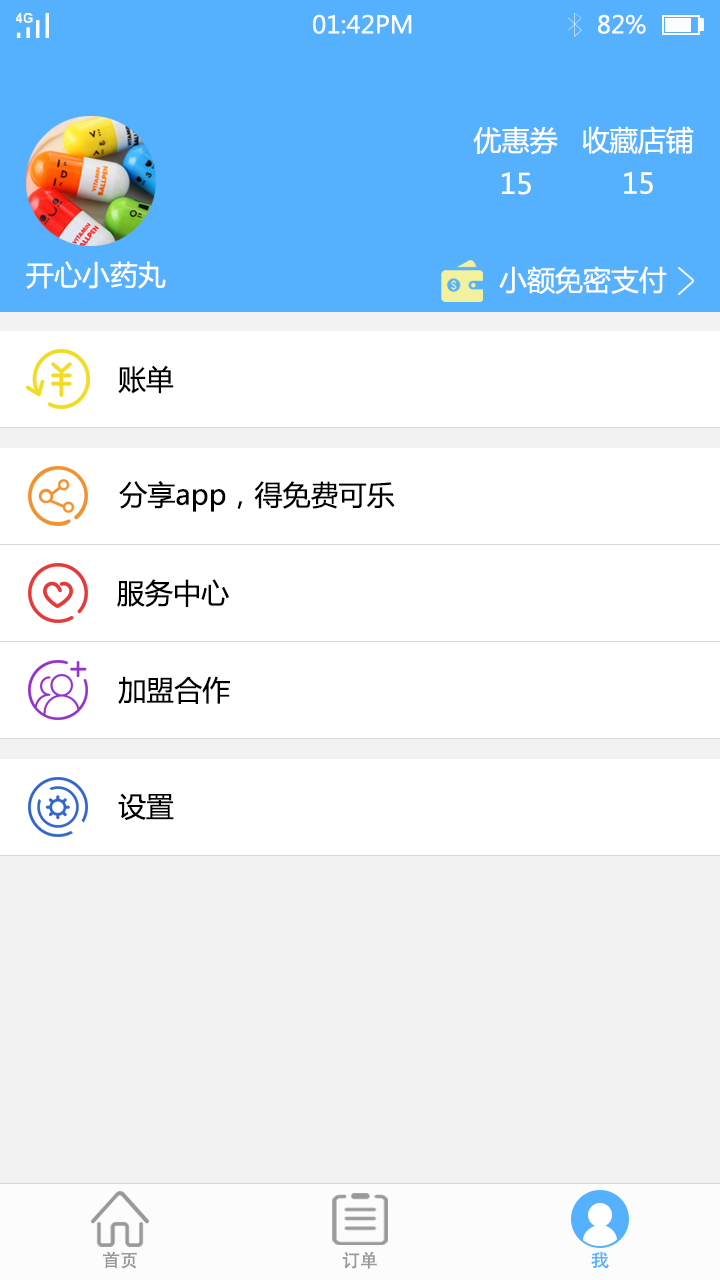
<style>
.page{position:relative;width:720px;height:1280px;background:#ffffff}
.page>*{position:absolute;margin:0}
.t1{font:24px "MicrosoftYaHei";color:#fbfdfc}
.t2{font:28.1px "MicrosoftYaHei";color:#fffefe}
.t3{font:28px "MicrosoftYaHei";color:#fffefe}
.t4{font:28px "MicrosoftYaHei";color:#000000}
.t5{font:18px "AdobeHeitiStd-Regular";color:#999999}
.t6{font:18px "AdobeHeitiStd-Regular";color:#55b0fe;scale:1.05 1}
</style>
<div class="page">
<p class="t1" style="left:313px;top:14px;width:99px;height:20px">01:42PM</p>
<p class="t1" style="left:598px;top:14px;width:48px;height:20px">82%</p>
<p class="t2" style="left:473px;top:126px;width:85px;height:29px">优惠券</p>
<p class="t3" style="left:582px;top:126px;width:112px;height:28px">收藏店铺</p>
<p class="t2" style="left:502px;top:172px;width:29px;height:23px">15</p>
<p class="t3" style="left:624px;top:171px;width:29px;height:23px">15</p>
<p class="t3" style="left:26px;top:261px;width:140px;height:28px">开心小药丸</p>
<p class="t3" style="left:499px;top:266px;width:168px;height:28px">小额免密支付</p>
<p class="t4" style="left:118px;top:365px;width:56px;height:29px">账单</p>
<p class="t4" style="left:119px;top:481px;width:276px;height:31px">分享app，得免费可乐</p>
<p class="t4" style="left:117px;top:579px;width:112px;height:28px">服务中心</p>
<p class="t4" style="left:118px;top:676px;width:112px;height:28px">加盟合作</p>
<p class="t4" style="left:118px;top:793px;width:56px;height:28px">设置</p>
<p class="t5" style="left:103px;top:1251px;width:34px;height:18px">首页</p>
<p class="t5" style="left:342px;top:1251px;width:35px;height:18px">订单</p>
<p class="t6" style="left:591px;top:1251px;width:18px;height:18px">我</p>
</div>
